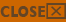
<style>
.page{position:relative;width:66px;height:22px;background:#cc6600}
.page>*{position:absolute;margin:0}
.t1{font:16.1px "GillSans-Bold";color:#644525;scale:0.83 1}
</style>
<div class="page">
<p class="t1" style="left:0px;top:6px;width:45px;height:11px">CLOSE</p>
</div>
